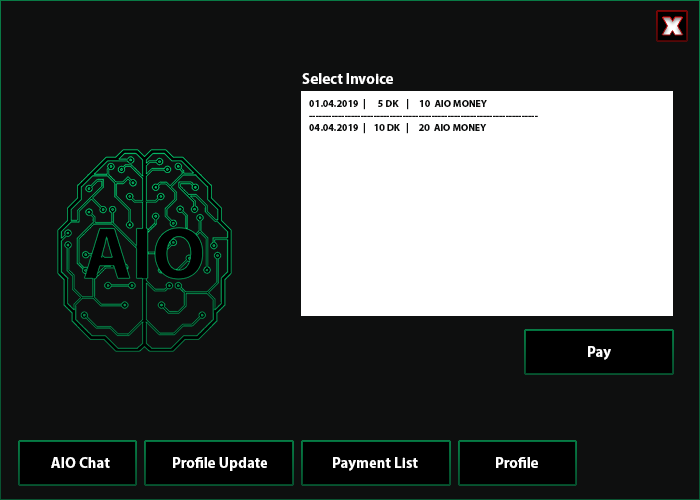
<style>
.page{position:relative;width:700px;height:500px;background:#0e0f0f}
.page>*{position:absolute;margin:0}
.t1{font:15px "MyriadPro-Bold";color:#ffffff}
.t2{font:10px "MyriadPro-Bold";color:#0e0f0f}
</style>
<div class="page">
<p class="t1" style="left:302px;top:73px;width:91px;height:11px">Select Invoice</p>
<p class="t2" style="left:309px;top:99px;width:229px;height:35px">01.04.2019  |      5 DK    |     10  AIO MONEY<br>-----------------------------------------------------------------------<br>04.04.2019  |    10 DK   |     20  AIO MONEY</p>
<p class="t1" style="left:588px;top:346px;width:23px;height:14px">Pay</p>
<p class="t1" style="left:51px;top:457px;width:59px;height:11px">AIO Chat</p>
<p class="t1" style="left:173px;top:457px;width:94px;height:14px">Profile Update</p>
<p class="t1" style="left:333px;top:457px;width:85px;height:14px">Payment List</p>
<p class="t1" style="left:496px;top:457px;width:42px;height:11px">Profile</p>
</div>
